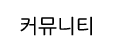
<style>
.page{position:relative;width:120px;height:53px;background:#ffffff}
.page>*{position:absolute;margin:0}
.t1{font:19.9px "NanumGothic";color:#000000}
</style>
<div class="page">
<p class="t1" style="left:20px;top:16px;width:72px;height:20px">커뮤니티</p>
</div>
